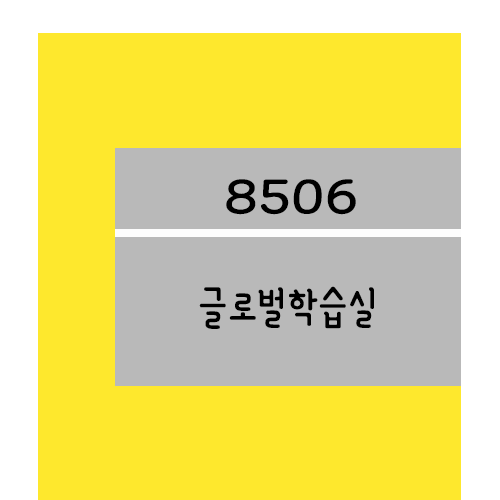
<style>
.page{position:relative;width:500px;height:500px;background:#fee82d}
.page>*{position:absolute;margin:0}
.t1{font:61.2px "YanoljaYacheR";color:#000000;scale:1.18 1}
.t2{font:48px "YanoljaYacheR";color:#000000}
</style>
<div class="page">
<p class="t1" style="left:226px;top:179px;width:130px;height:36px">8506</p>
<p class="t2" style="left:199px;top:286px;width:175px;height:43px">글로벌학습실</p>
</div>
